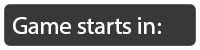
<style>
.page{position:relative;width:200px;height:50px;background:#383838}
.page>*{position:absolute;margin:0}
.t1{font:24px "MyriadHebrew-Regular";color:#ffffff}
</style>
<div class="page">
<p class="t1" style="left:13px;top:17px;width:148px;height:17px">:Game starts in</p>
</div>
